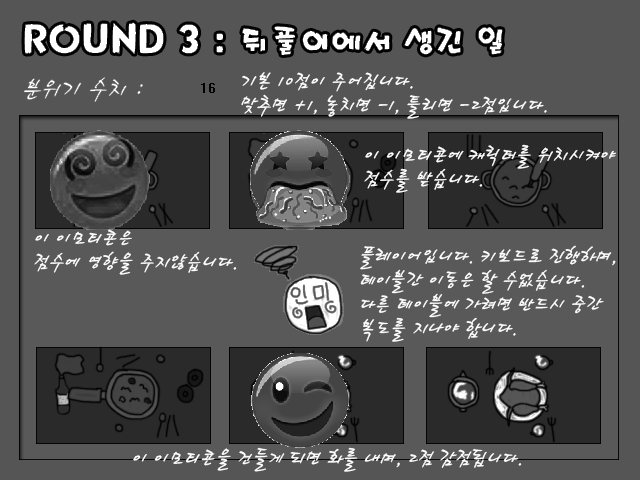
<style>
.page{position:relative;width:640px;height:480px;background:#595959}
.page>*{position:absolute;margin:0}
.t1{font:24px/24px "HaanCjaB";color:#ffffff}
.t2{font:24px "HaanCjaB";color:#ffffff}
</style>
<div class="page">
<p class="t1" style="left:241px;top:72px;width:306px;height:47px">기본 10점이 주어집니다.<br>맞추면 +1, 놓치면 -1, 틀리면 -2점입니다.</p>
<p class="t1" style="left:364px;top:144px;width:253px;height:49px">이 이모티콘에 캐릭터를 위치시켜야<br>점수를 받습니다.</p>
<p class="t1" style="left:34px;top:229px;width:203px;height:46px">이 이모티콘은<br>점수에 영향을 주지않습니다.</p>
<p class="t1" style="left:360px;top:245px;width:256px;height:97px">플레이어입니다. 키보드로 진행하며, <br>테이블간 이동은 할 수없습니다.<br>다른 테이블에 가려면 반드시 중간<br>복도를 지나야 합니다.</p>
<p class="t2" style="left:133px;top:447px;width:389px;height:25px">이 이모티콘을 건들게 되면 화를 내며, 2점 감점됩니다.</p>
</div>
